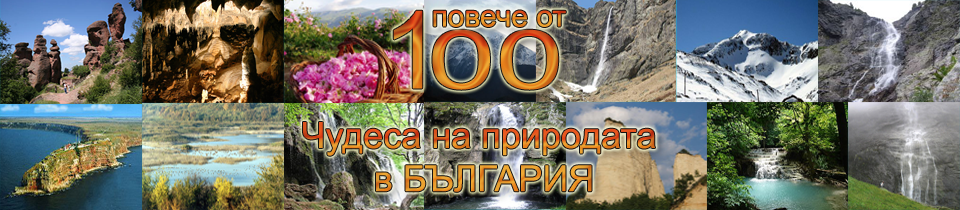
<style>
.page{position:relative;width:960px;height:210px}
.page>*{position:absolute;margin:0}
.t1{font:108px "ArialMT"}
.t2{font:30px "ArialMT"}
.t3{font:81.6px "ArialMT";scale:1.5 1}
.t4{font:36px "ArialMT"}
</style>
<div class="page">
<p class="t1" style="left:393px;top:10px;width:30px;height:79px">1</p>
<p class="t2" style="left:433px;top:10px;width:133px;height:17px">повече от</p>
<p class="t3" style="left:432px;top:29px;width:127px;height:61px">00</p>
<p class="t4" style="left:303px;top:122px;width:352px;height:70px;text-align:center">Чудеса на природата <br>в БЪЛГАРИЯ</p>
</div>
